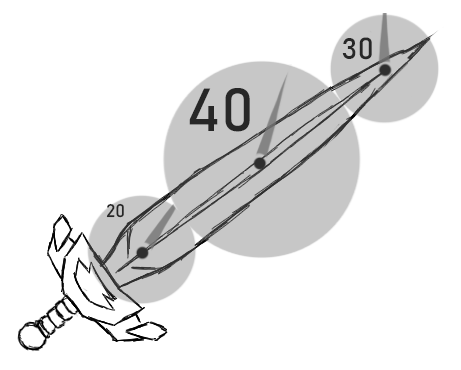
<style>
.page{position:relative;width:461px;height:370px;background:#ffffff}
.page>*{position:absolute;margin:0}
.t1{font:30px "Bahnschrift";color:#272727}
.t2{font:60px "Bahnschrift";color:#272727}
.t3{font:18px "Bahnschrift";color:#272727}
</style>
<div class="page">
<p class="t1" style="left:342px;top:37px;width:30px;height:23px">30</p>
<p class="t2" style="left:189px;top:88px;width:61px;height:44px">40</p>
<p class="t3" style="left:106px;top:203px;width:18px;height:15px">20</p>
</div>
